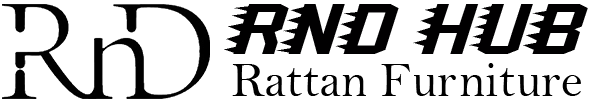
<style>
.page{position:relative;width:608px;height:100px;background:#ffffff}
.page>*{position:absolute;margin:0}
.t1{font:72px "SlowConnection-Regular";color:#010001}
.t2{font:50px "BellMT";color:#000000}
</style>
<div class="page">
<p class="t1" style="left:224px;top:4px;width:364px;height:50px">RnD HuB</p>
<p class="t2" style="left:232px;top:63px;width:349px;height:33px">Rattan Furniture</p>
</div>
